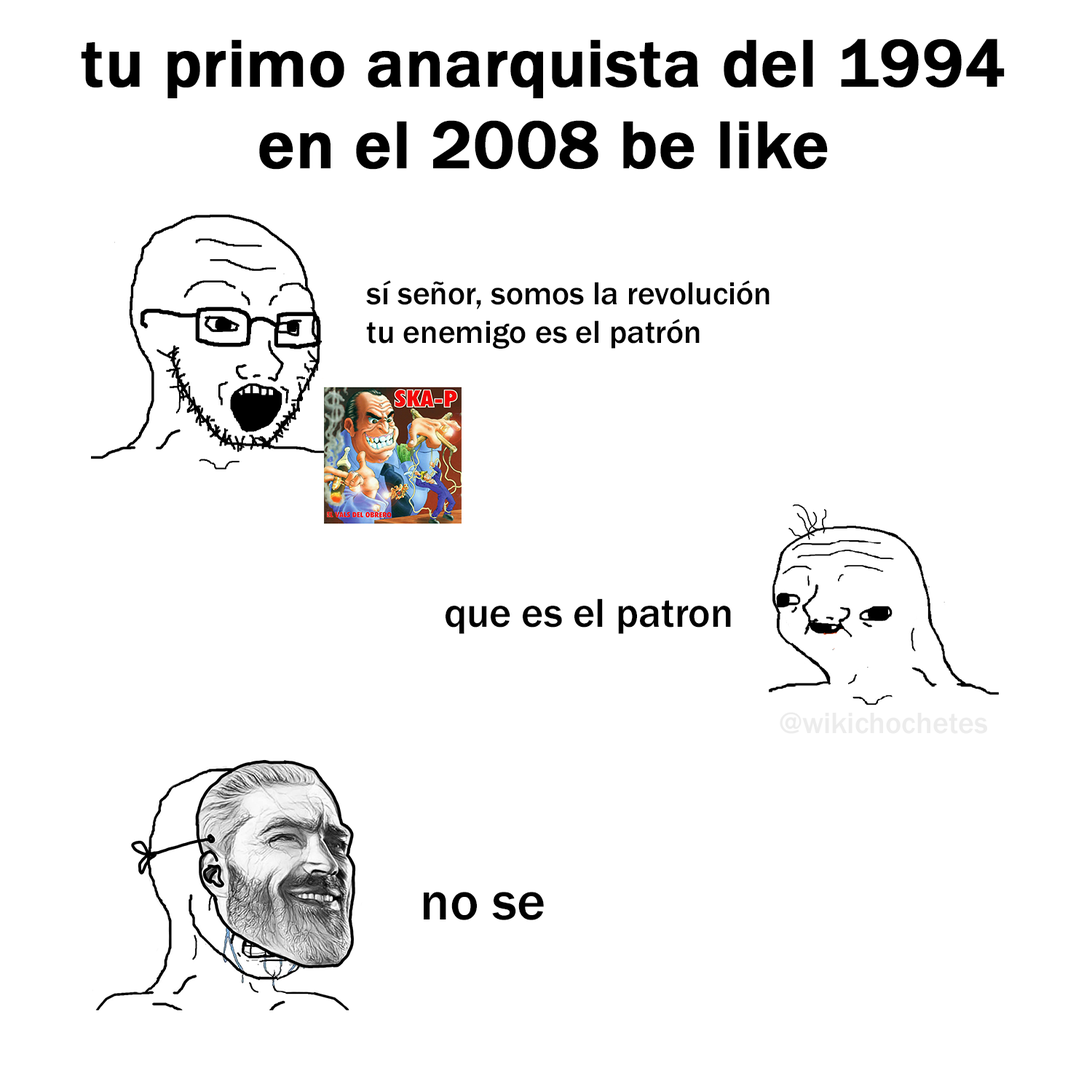
<style>
.page{position:relative;width:1092px;height:1092px;background:#ffffff}
.page>*{position:absolute;margin:0}
.t1{font:69.2px "FranklinGothic-Medium";color:#000000;font-weight:bold}
.t2{font:33px "FranklinGothic-Medium";color:#000000}
.t3{font:41.9px "FranklinGothic-Medium";color:#000000}
.t4{font:30.6px "FranklinGothic-Medium";color:#ececec}
.t5{font:54.6px "FranklinGothic-Medium";color:#000000}
</style>
<div class="page">
<p class="t1" style="left:81px;top:39px;width:924px;height:131px;text-align:center">tu primo anarquista del 1994<br>en el 2008 be like</p>
<p class="t2" style="left:366px;top:280px;width:403px;height:69px">sí señor, somos la revolución<br>tu enemigo es el patrón</p>
<p class="t3" style="left:446px;top:598px;width:285px;height:36px">que es el patron</p>
<p class="t4" style="left:780px;top:712px;width:207px;height:22px">@wikichochetes</p>
<p class="t5" style="left:424px;top:892px;width:120px;height:28px">no se</p>
</div>
